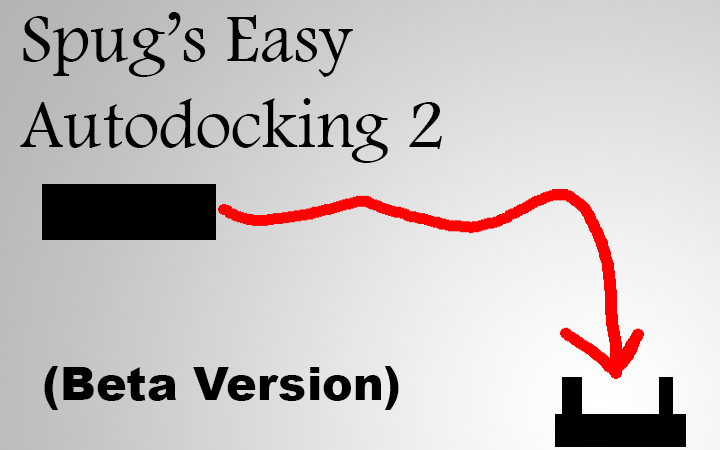
<style>
.page{position:relative;width:720px;height:450px}
.page>*{position:absolute;margin:0}
.t1{font:71.4px "FootlightMTLight";color:#000000}
.t2{font:46px "Arial-Black";color:#000000}
</style>
<div class="page">
<p class="t1" style="left:20px;top:12px;width:422px;height:151px">Spug’s Easy<br>Autodocking 2</p>
<p class="t2" style="left:44px;top:366px;width:355px;height:44px">(Beta Version)</p>
</div>
